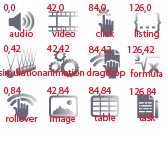
<style>
.page{position:relative;width:168px;height:168px;background:#ffffff}
.page>*{position:absolute;margin:0}
.t1{font:10px "MyriadPro-Regular";color:#e31a30}
</style>
<div class="page">
<p class="t1" style="left:3px;top:4px;width:13px;height:9px">0,0</p>
<p class="t1" style="left:46px;top:4px;width:18px;height:9px">42,0</p>
<p class="t1" style="left:88px;top:4px;width:18px;height:9px">84,0</p>
<p class="t1" style="left:129px;top:4px;width:23px;height:9px">126,0</p>
<p class="t1" style="left:9px;top:29px;width:24px;height:8px">audio</p>
<p class="t1" style="left:52px;top:29px;width:24px;height:8px">video</p>
<p class="t1" style="left:96px;top:29px;width:19px;height:8px">click</p>
<p class="t1" style="left:134px;top:29px;width:25px;height:10px">listing</p>
<p class="t1" style="left:3px;top:45px;width:18px;height:9px">0,42</p>
<p class="t1" style="left:46px;top:45px;width:24px;height:9px">42,42</p>
<p class="t1" style="left:89px;top:46px;width:23px;height:9px">84,42</p>
<p class="t1" style="left:127px;top:46px;width:28px;height:9px">126,42</p>
<p class="t1" style="left:0px;top:68px;width:42px;height:8px">simulation</p>
<p class="t1" style="left:42px;top:69px;width:43px;height:7px">animation</p>
<p class="t1" style="left:86px;top:68px;width:40px;height:10px">dragdrop</p>
<p class="t1" style="left:130px;top:69px;width:33px;height:8px">formula</p>
<p class="t1" style="left:3px;top:87px;width:18px;height:9px">0,84</p>
<p class="t1" style="left:46px;top:87px;width:23px;height:9px">42,84</p>
<p class="t1" style="left:89px;top:87px;width:22px;height:9px">84,84</p>
<p class="t1" style="left:129px;top:88px;width:27px;height:9px">126,84</p>
<p class="t1" style="left:94px;top:113px;width:22px;height:8px">table</p>
<p class="t1" style="left:139px;top:113px;width:17px;height:8px">task</p>
<p class="t1" style="left:6px;top:114px;width:32px;height:8px">rollover</p>
<p class="t1" style="left:50px;top:115px;width:26px;height:9px">image</p>
</div>
